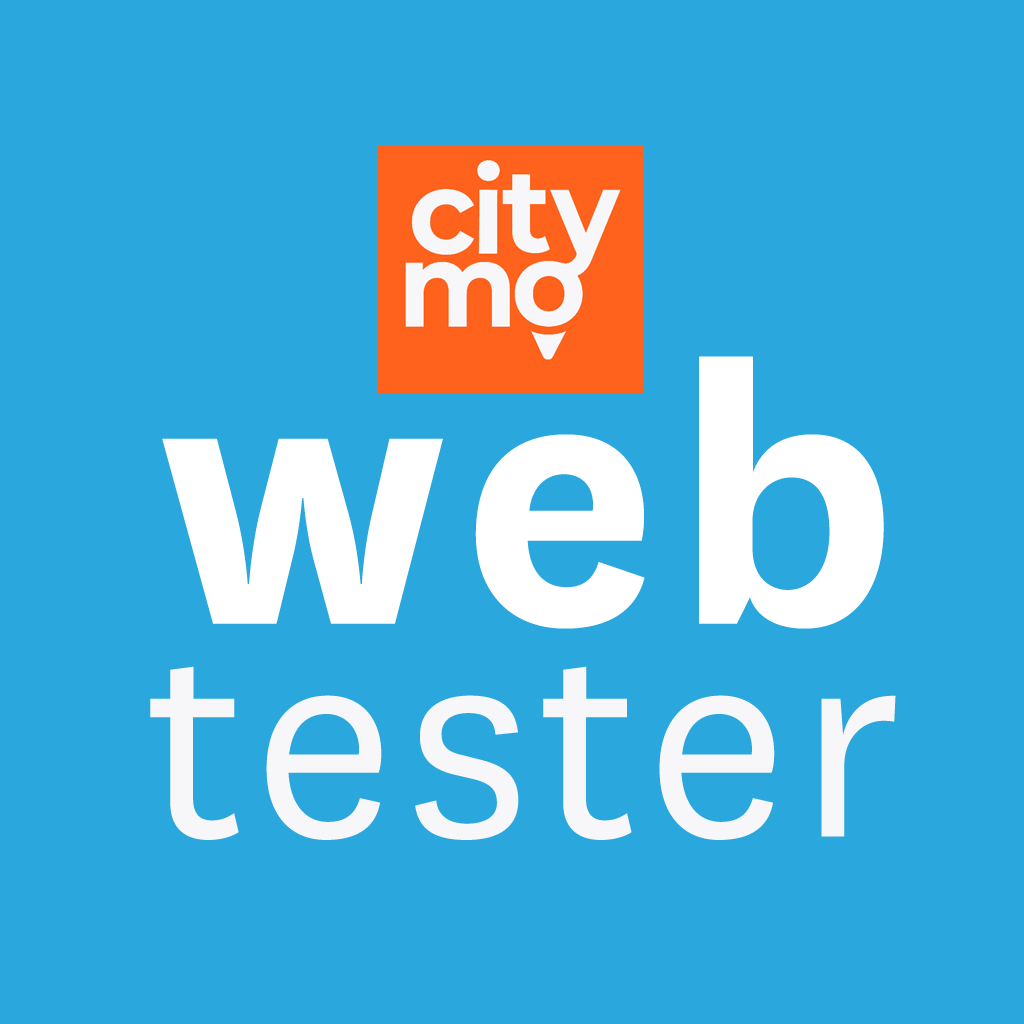
<style>
.page{position:relative;width:1024px;height:1024px;background:#2aa7dd}
.page>*{position:absolute;margin:0}
.t1{font:400px "National-Bold";letter-spacing:0.04em;color:#ffffff}
.t2{font:297.2px "National-Book";letter-spacing:0.04em;color:#f7f7f9}
</style>
<div class="page">
<p class="t1" style="left:162px;top:356px;width:722px;height:273px">web</p>
<p class="t2" style="left:150px;top:666px;width:746px;height:174px">tester</p>
</div>
